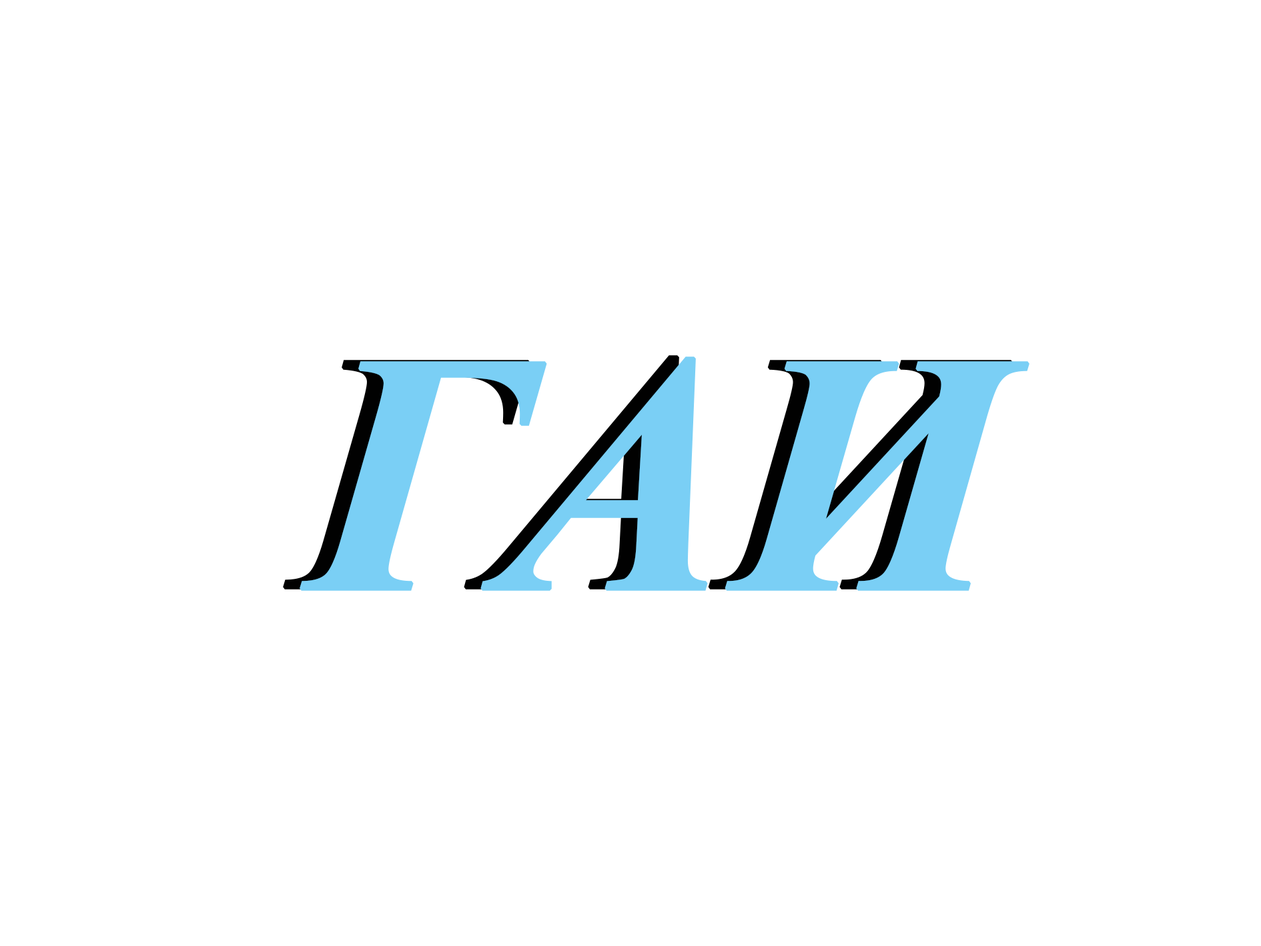
<style>
.page{position:relative;width:1261px;height:946px;background:#ffffff}
.page>*{position:absolute;margin:0}
.t1{font:340.5px "TimesNewRomanPS-BoldItalicMT";font-weight:bold}
.t2{font:340.5px "TimesNewRomanPS-BoldItalicMT";color:#7acff5;font-weight:bold}
</style>
<div class="page">
<p class="t1" style="left:283px;top:355px;width:730px;height:234px">ГАИ</p>
<p class="t2" style="left:300px;top:356px;width:730px;height:235px">ГАИ</p>
</div>
